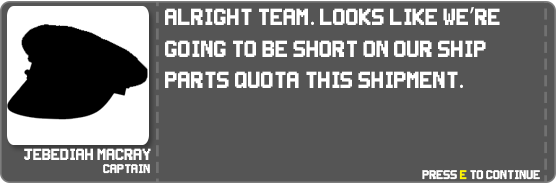
<style>
.page{position:relative;width:557px;height:184px;background:#555555}
.page>*{position:absolute;margin:0}
.t1{font:26px "Super-Smash-TV";color:#ffffff}
.t2{font:26px "MyriadPro-Regular";color:#ffffff}
.t3{font:18px "Super-Smash-TV";color:#ffffff}
.t4{font:14px "Super-Smash-TV";color:#ffffff}
.t5{font:14px "Super-Smash-TV";color:#fff600}
</style>
<div class="page">
<p class="t1" style="left:165px;top:7px;width:335px;height:81px">Alright team<span class="t2">.</span> Looks like we<span class="t2">’</span>re going to be short on our ship parts quota this shipment<span class="t2">.</span></p>
<p class="t3" style="left:24px;top:148px;width:127px;height:12px">Jebediah Macray</p>
<p class="t4" style="left:103px;top:164px;width:47px;height:10px">Captain</p>
<p class="t4" style="left:422px;top:170px;width:118px;height:10px">Press <span class="t5">E</span> to continue</p>
</div>
